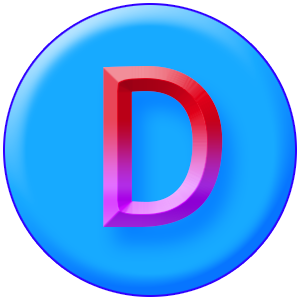
<style>
.page{position:relative;width:300px;height:300px;background:#ffffff}
.page>*{position:absolute;margin:0}
.t1{font:223.6px "TrebuchetMS-Bold"}
</style>
<div class="page">
<p class="t1" style="left:103px;top:66px;width:120px;height:161px">D</p>
</div>
